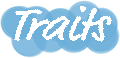
<style>
.page{position:relative;width:120px;height:58px;background:#ffffff}
.page>*{position:absolute;margin:0}
.t1{font:48px "MarketOT";color:#ffffff;scale:1.1 1}
</style>
<div class="page">
<p class="t1" style="left:14px;top:6px;width:98px;height:36px">Traits</p>
</div>
